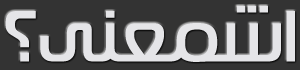
<style>
.page{position:relative;width:300px;height:70px;background:#333333}
.page>*{position:absolute;margin:0}
.t1{font:72px "HacenSaudiArabia";color:#e5e5e8}
</style>
<div class="page">
<p class="t1" style="left:5px;top:5px;width:290px;height:57px">اشمعنى؟</p>
</div>
